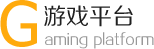
<style>
.page{position:relative;width:154px;height:49px;background:#ffffff}
.page>*{position:absolute;margin:0}
.t1{font:62px "Tahoma";color:#ffaa0d}
.t2{font:23px "FZZHJW--GB1-0";color:#202020}
.t3{font:14px "FZZHJW--GB1-0";color:#999999}
</style>
<div class="page">
<p class="t1" style="left:0px;top:0px;width:37px;height:47px">G</p>
<p class="t2" style="left:44px;top:5px;width:89px;height:22px">游戏平台</p>
<p class="t3" style="left:45px;top:32px;width:109px;height:17px">aming platform</p>
</div>
